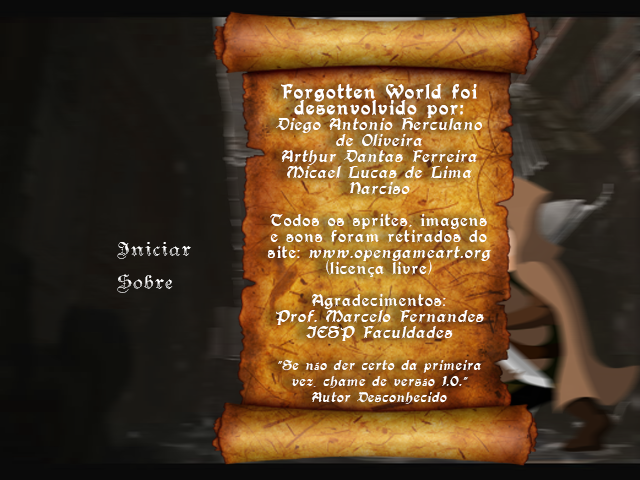
<style>
.page{position:relative;width:640px;height:480px}
.page>*{position:absolute;margin:0}
.t1{font:12px/16px "PerryGothic";letter-spacing:0.1em;color:#ffffff;font-style:italic}
.t2{font:12px/16px "PerryGothic";letter-spacing:0.1em;color:#ffffff}
.t3{font:14px/16px "PerryGothic";letter-spacing:0.1em;color:#ffffff;font-weight:bold}
.t4{font:14px/16px "MyriadPro-Regular";letter-spacing:0.1em;color:#ffffff}
.t5{font:10px/16px "PerryGothic";letter-spacing:0.1em;color:#ffffff;font-style:italic}
.t6{font:10px/16px "MyriadPro-Regular";letter-spacing:0.1em;color:#ffffff;font-style:italic}
.t7{font:16px "TeutonicNo3-DemiBold";letter-spacing:0.1em;color:#ffffff}
</style>
<div class="page">
<p class="t1" style="left:267px;top:84px;width:224px;height:320px;text-align:center"><span class="t2"><br></span><span class="t3">Forgotten World foi desenvolvido por:<br></span>Diego Antonio Herculano de Oliveira<br>Arthur Dantas Ferreira<br>Micael Lucas de Lima Narciso<br><br><span class="t2">Todos os sprites, imagens e sons foram retirados do site: </span>www.opengameart.org<span class="t2"> (licen</span><span class="t4">ç</span><span class="t2">a livre)<br><br>Agradecimentos:<br></span>Prof. Marcelo Fernandes<br>IESP Faculdades<br><br><span class="t5">"Se n</span><span class="t6">ã</span><span class="t5">o der certo da primeira vez, chame de vers</span><span class="t6">ã</span><span class="t5">o 1.0." <br>Autor Desconhecido</span></p>
<p class="t7" style="left:117px;top:242px;width:74px;height:17px">Iniciar</p>
<p class="t7" style="left:117px;top:274px;width:56px;height:19px">Sobre</p>
</div>
